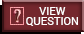
<style>
.page{position:relative;width:84px;height:34px;background:#74272d}
.page>*{position:absolute;margin:0}
.t1{font:11px/10px "Roboto-Regular";color:#ffffff}
</style>
<div class="page">
<p class="t1" style="left:26px;top:7px;width:52px;height:19px;text-align:center">VIEW<br>QUESTION</p>
</div>
